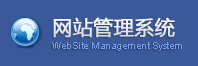
<style>
.page{position:relative;width:198px;height:66px;background:#3b5999}
.page>*{position:absolute;margin:0}
.t1{font:20px "MicrosoftYaHei";color:#ffffff;font-weight:bold}
.t2{font:10px "ArialMT";letter-spacing:-0.05em;color:#789ff0}
</style>
<div class="page">
<p class="t1" style="left:53px;top:17px;width:122px;height:21px">网站管理系统</p>
<p class="t2" style="left:52px;top:42px;width:130px;height:9px">WebSite Management System</p>
</div>
